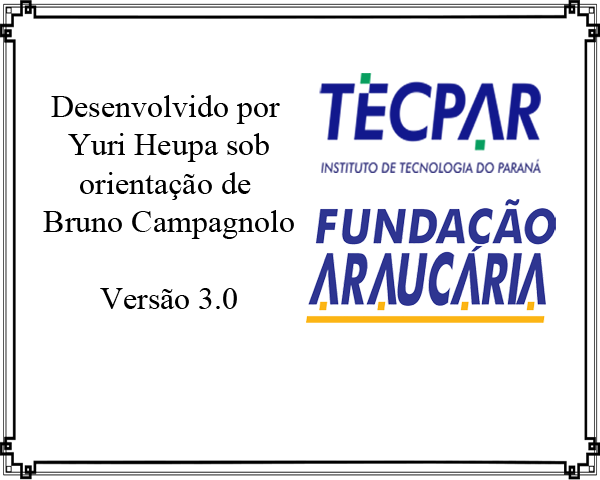
<style>
.page{position:relative;width:600px;height:480px;background:#ffffff}
.page>*{position:absolute;margin:0}
.t1{font:32px "TimesNewRomanPSMT";color:#000000}
</style>
<div class="page">
<p class="t1" style="left:43px;top:95px;width:251px;height:214px;text-align:center">Desenvolvido por <br>Yuri Heupa sob<br>orientação de <br>Bruno Campagnolo<br><br>Versão 3.0</p>
</div>
